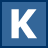
<style>
.page{position:relative;width:48px;height:48px;background:#336699}
.page>*{position:absolute;margin:0}
.t1{font:40px "Tahoma-Bold";color:#ffffff}
</style>
<div class="page">
<p class="t1" style="left:11px;top:9px;width:26px;height:30px">K</p>
</div>
